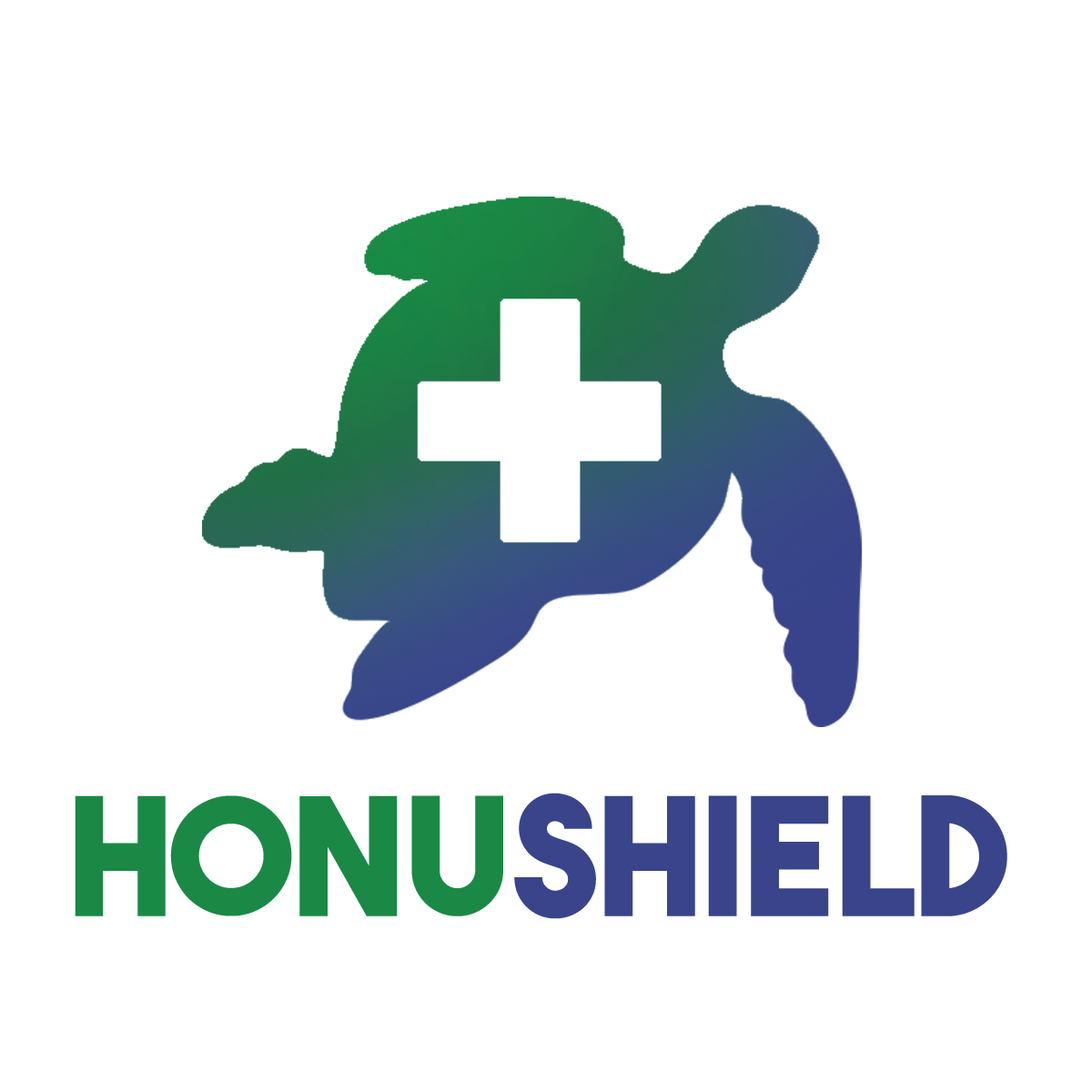
<style>
.page{position:relative;width:1092px;height:1092px;background:#ffffff}
.page>*{position:absolute;margin:0}
.t1{font:163.8px "TheBoldFont";color:#39448b}
.t2{font:163.8px "TheBoldFont";color:#1a8945}
</style>
<div class="page">
<p class="t1" style="left:75px;top:793px;width:932px;height:126px"><span class="t2">Honu</span>Shield</p>
</div>
